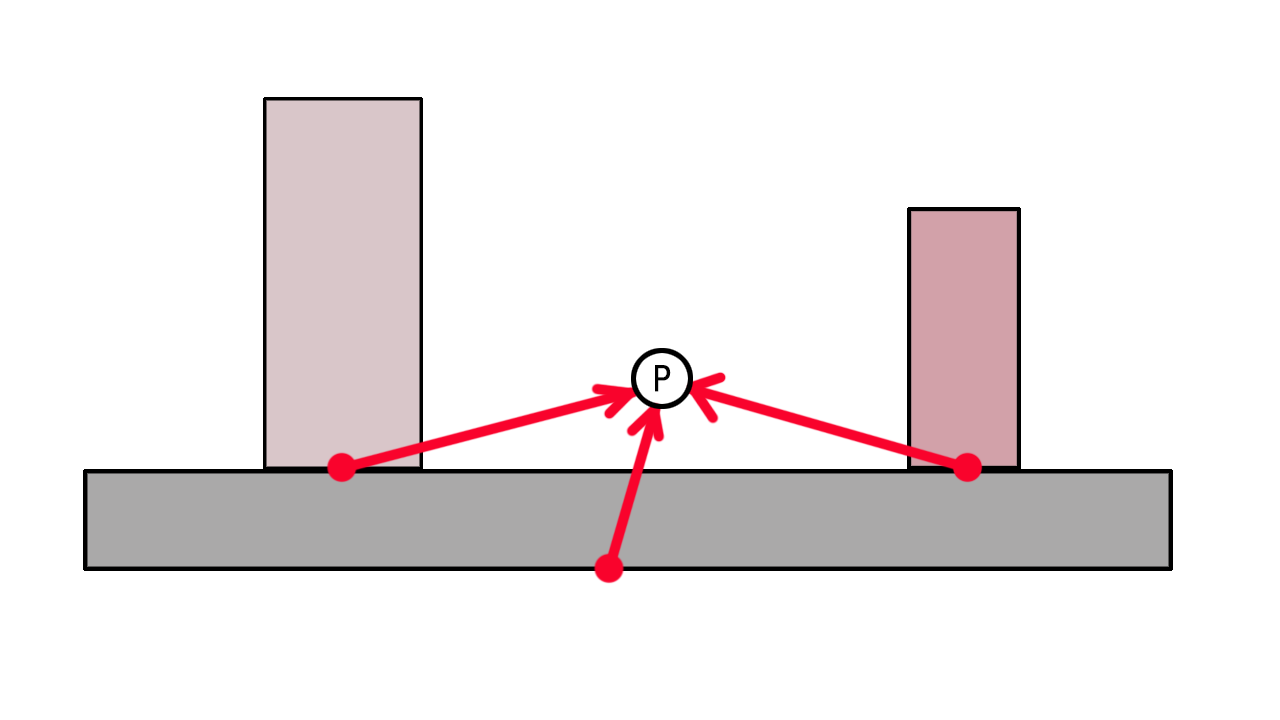
<style>
.page{position:relative;width:1280px;height:720px;background:#ffffff}
.page>*{position:absolute;margin:0}
.t1{font:33.3px "HGPGothicE";letter-spacing:0.1em;color:#000000}
</style>
<div class="page">
<p class="t1" style="left:655px;top:365px;width:16px;height:27px">P</p>
</div>
